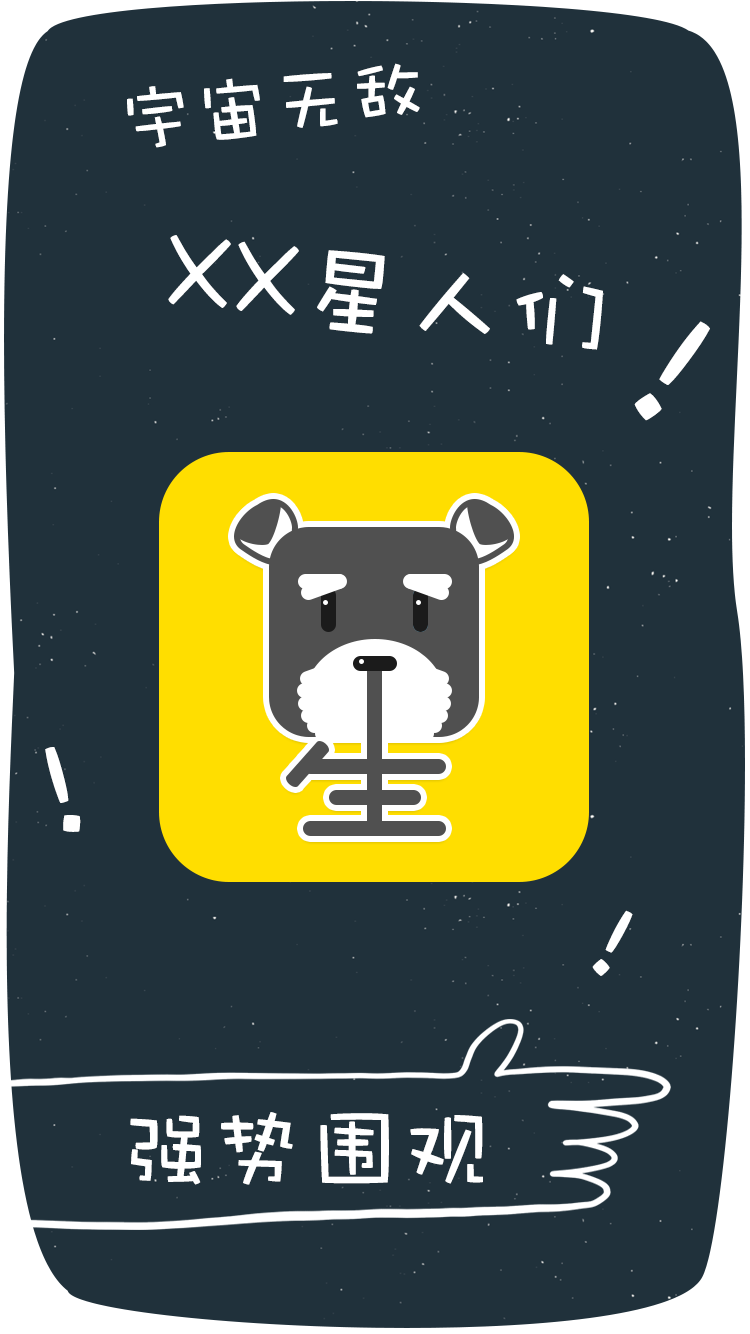
<style>
.page{position:relative;width:750px;height:1334px;background:#20313b}
.page>*{position:absolute;margin:0}
.t1{font:77.5px "DFWaWaSC-W5";letter-spacing:0.01em;color:#ffffff}
.t2{font:103.3px "DFWaWaSC-W5";letter-spacing:0.01em;color:#ffffff}
.t3{font:167.8px "DFWaWaSC-W5";letter-spacing:0.01em;color:#ffffff}
.t4{font:132px "DFWaWaSC-W5";letter-spacing:0.01em;color:#ffffff}
.t5{font:103.7px "DFWaWaSC-W5";letter-spacing:0.01em;color:#ffffff}
.t6{font:92.4px "DFWaWaSC-W5";letter-spacing:0.01em;color:#ffffff}
</style>
<div class="page">
<p class="t1" style="left:127px;top:63px;width:293px;height:85px;rotate:-7deg">宇宙无敌</p>
<p class="t2" style="left:168px;top:235px;width:435px;height:115px;rotate:6deg">XX星人们</p>
<p class="t3" style="left:634px;top:321px;width:76px;height:100px;rotate:31deg">！</p>
<p class="t4" style="left:45px;top:747px;width:36px;height:85px;rotate:-20deg">！</p>
<p class="t5" style="left:592px;top:910px;width:41px;height:66px;rotate:23deg">！</p>
<p class="t6" style="left:130px;top:1112px;width:353px;height:73px">强势围观</p>
</div>
